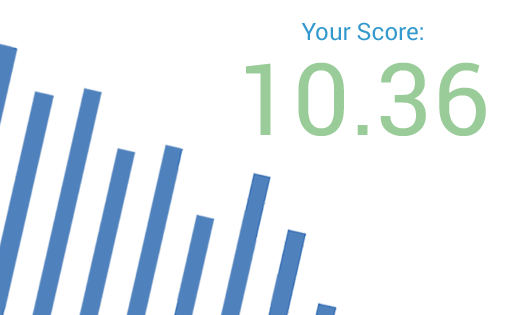
<style>
.page{position:relative;width:530px;height:315px;background:#ffffff}
.page>*{position:absolute;margin:0}
.t1{font:24.1px "Roboto-Regular";color:#3399cc}
.t2{font:100.2px "Roboto-Regular";color:#99cc99}
</style>
<div class="page">
<p class="t1" style="left:301px;top:22px;width:122px;height:19px">Your Score:</p>
<p class="t2" style="left:246px;top:62px;width:240px;height:74px">10.36</p>
</div>
